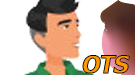
<style>
.page{position:relative;width:135px;height:75px;background:#ffffff}
.page>*{position:absolute;margin:0}
.t1{font:24px "Tahoma-Bold";letter-spacing:-0.065em;font-weight:bold;font-style:italic}
</style>
<div class="page">
<p class="t1" style="left:82px;top:55px;width:48px;height:19px">OTS</p>
</div>
